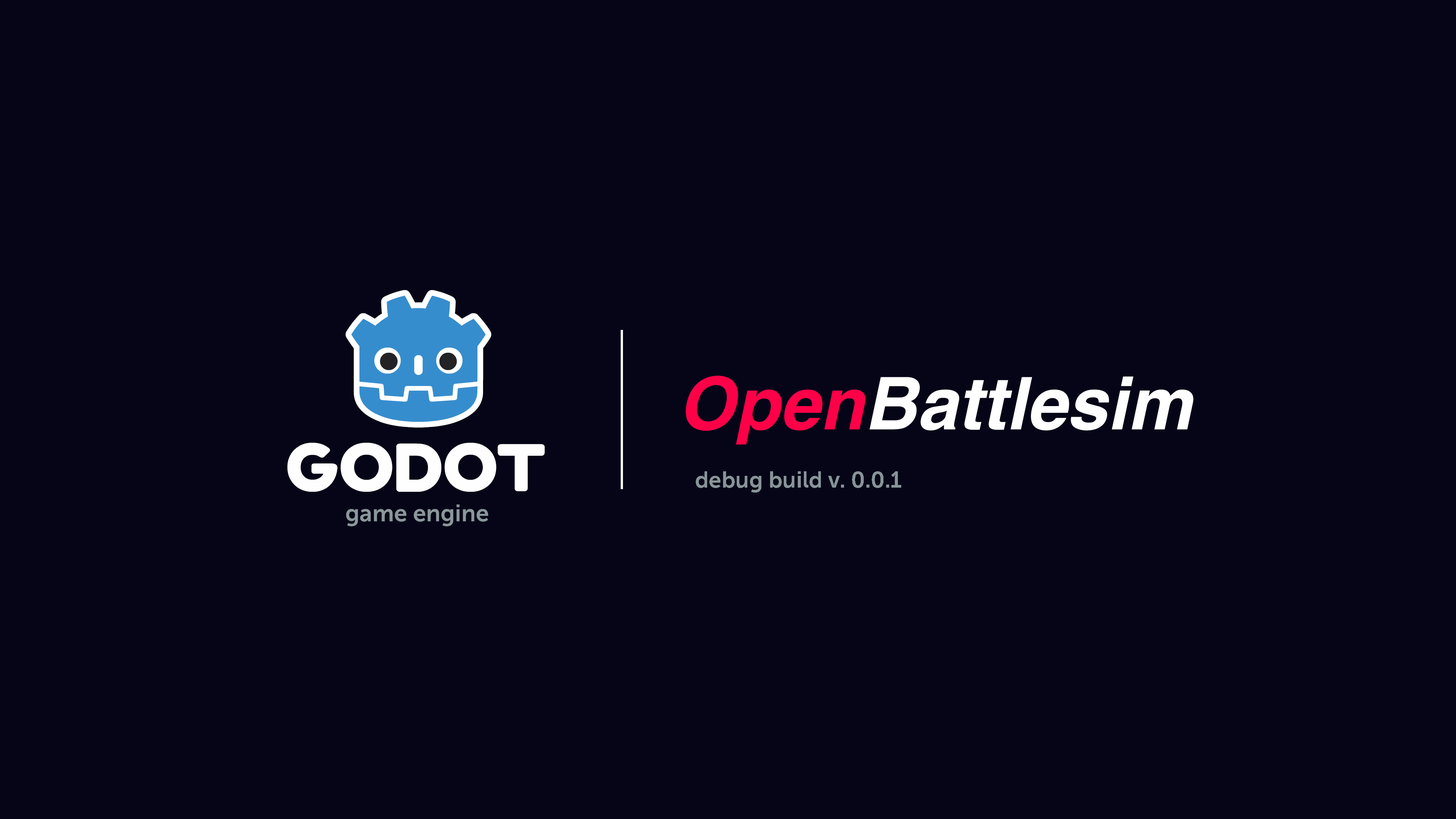
<style>
.page{position:relative;width:1456px;height:819px;background:#050517}
.page>*{position:absolute;margin:0}
.t1{font:72.8px "AGHlvCyrillicBold-ItalicA";color:#ffffff}
.t2{font:72.8px "AGHlvCyrillicBold-ItalicA";color:#ff0048}
.t3{font:22.7px "MuseoSans-700";color:#879398}
</style>
<div class="page">
<p class="t1" style="left:686px;top:375px;width:508px;height:70px"><span class="t2">Open</span>Battlesim</p>
<p class="t3" style="left:696px;top:471px;width:205px;height:22px">debug build v. 0.0.1</p>
</div>
